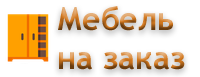
<style>
.page{position:relative;width:200px;height:77px;background:#ffffff}
.page>*{position:absolute;margin:0}
.t1{font:32px "TrebuchetMS-Bold"}
</style>
<div class="page">
<p class="t1" style="left:58px;top:6px;width:127px;height:64px">Мебель <br>на заказ</p>
</div>
